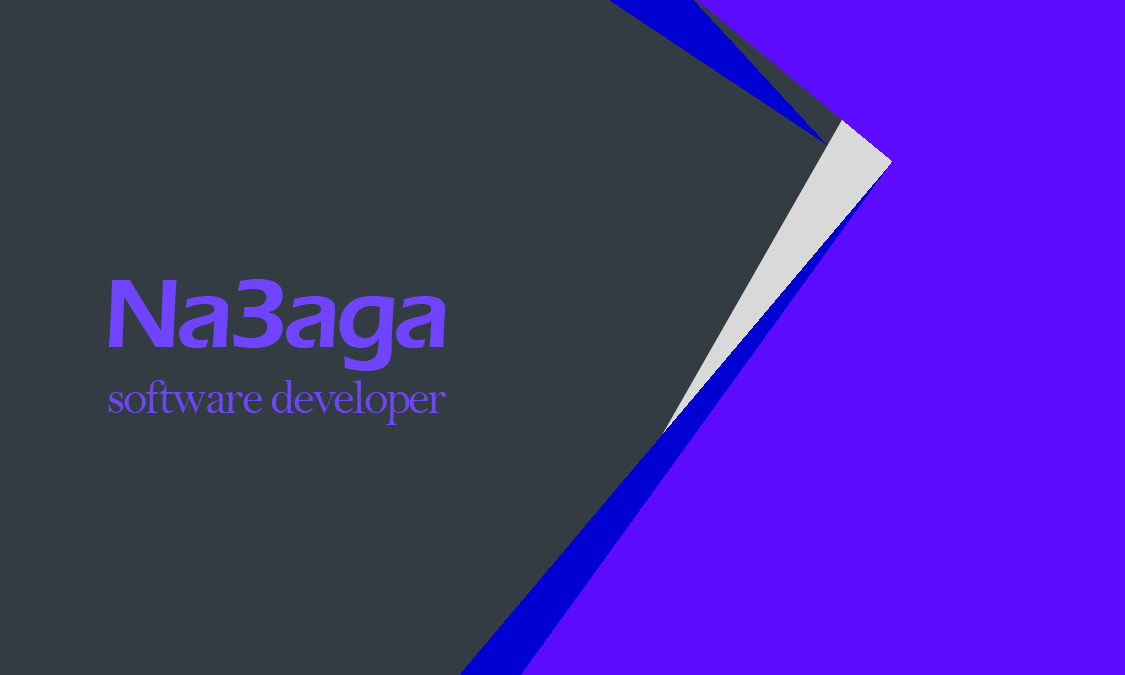
<style>
.page{position:relative;width:1125px;height:675px;background:#323c42}
.page>*{position:absolute;margin:0}
.t1{font:100px "ErasITC-Demi";letter-spacing:-0.05em;color:#7044ff}
.t2{font:50px "BellMT";letter-spacing:-0.05em;color:#7044ff}
</style>
<div class="page">
<p class="t1" style="left:108px;top:279px;width:337px;height:92px">Na3aga</p>
<p class="t2" style="left:108px;top:380px;width:338px;height:45px">software developer</p>
</div>
